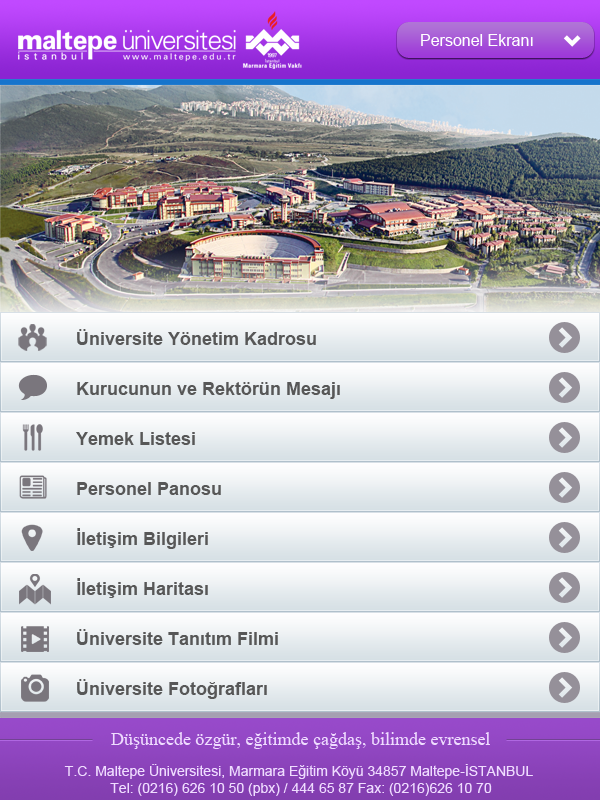
<style>
.page{position:relative;width:600px;height:800px}
.page>*{position:absolute;margin:0}
.t1{font:16px "ArialMT";color:#ffffff}
.t2{font:18px "Arial-BoldMT";color:#575757}
.t3{font:18px "TimesNewRomanPSMT";color:#efdcff}
.t4{font:14px "ArialMT";color:#efdcff}
</style>
<div class="page">
<p class="t1" style="left:421px;top:34px;width:112px;height:12px">Personel Ekranı</p>
<p class="t2" style="left:77px;top:329px;width:239px;height:16px">Üniversite Yönetim Kadrosu</p>
<p class="t2" style="left:77px;top:382px;width:263px;height:17px">Kurucunun ve Rektörün Mesajı</p>
<p class="t2" style="left:76px;top:432px;width:119px;height:13px">Yemek Listesi</p>
<p class="t2" style="left:77px;top:482px;width:144px;height:13px">Personel Panosu</p>
<p class="t2" style="left:77px;top:528px;width:131px;height:21px">İletişim Bilgileri</p>
<p class="t2" style="left:77px;top:578px;width:131px;height:20px">İletişim Haritası</p>
<p class="t2" style="left:77px;top:629px;width:201px;height:16px">Üniversite Tanıtım Filmi</p>
<p class="t2" style="left:77px;top:679px;width:190px;height:20px">Üniversite Fotoğrafları</p>
<p class="t3" style="left:111px;top:732px;width:379px;height:17px">Düşüncede özgür, eğitimde çağdaş, bilimde evrensel</p>
<p class="t4" style="left:64px;top:764px;width:469px;height:32px;text-align:center">T.C. Maltepe Üniversitesi, Marmara Eğitim Köyü 34857 Maltepe-İSTANBUL <br>Tel: (0216) 626 10 50 (pbx) / 444 65 87 Fax: (0216)626 10 70</p>
</div>
